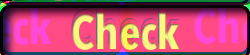
<style>
.page{position:relative;width:250px;height:55px;background:#ff4a84}
.page>*{position:absolute;margin:0}
.t1{font:48px "AvenirNextLTPro-BoldCn";letter-spacing:-0.025em}
</style>
<div class="page">
<p class="t1" style="left:71px;top:7px;width:109px;height:38px">Check</p>
<p class="t1" style="left:71px;top:7px;width:109px;height:38px">Check</p>
</div>
